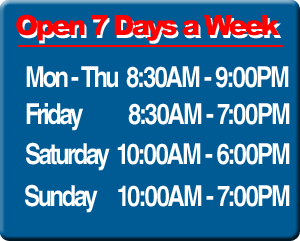
<style>
.page{position:relative;width:300px;height:241px;background:#005a93}
.page>*{position:absolute;margin:0}
.t1{font:28px "Arial-Black";letter-spacing:-0.1em;color:#ff0000}
.t2{font:28px "Arial-Black";letter-spacing:-0.1em}
.t3{font:28.8px "Helvetica-Bold";letter-spacing:-0.075em;color:#ffffff;scale:0.83 1}
.t4{font:28.8px "Helvetica-Bold";letter-spacing:-0.1em;color:#ffffff;scale:0.83 1}
</style>
<div class="page">
<p class="t1" style="left:16px;top:14px;width:264px;height:27px">Open 7 Days a Week</p>
<p class="t2" style="left:18px;top:17px;width:264px;height:27px">Open 7 Days a Week</p>
<p class="t3" style="left:26px;top:66px;width:263px;height:22px"><span class="t4">Mon - Thu  </span>8:30AM - 9:00PM</p>
<p class="t3" style="left:26px;top:103px;width:264px;height:28px"><span class="t4">Friday           </span>8:30AM - 7:00PM</p>
<p class="t3" style="left:26px;top:142px;width:264px;height:29px"><span class="t4">Saturday  </span>10:00AM - 6:00PM</p>
<p class="t3" style="left:25px;top:184px;width:265px;height:29px"><span class="t4">Sunday     </span>10:00AM - 7:00PM</p>
</div>
